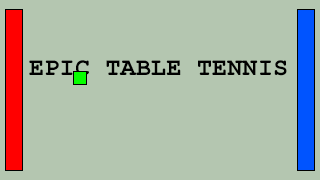
<style>
.page{position:relative;width:320px;height:180px;background:#b4c6b0}
.page>*{position:absolute;margin:0}
.t1{font:25px "CourierNewPS-BoldMT";letter-spacing:0.01em;color:#000000}
</style>
<div class="page">
<p class="t1" style="left:29px;top:60px;width:258px;height:16px">EPIC TABLE TENNIS</p>
</div>
